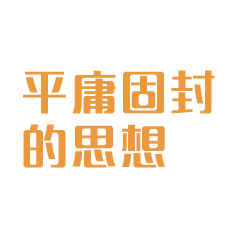
<style>
.page{position:relative;width:241px;height:233px;background:#ffffff}
.page>*{position:absolute;margin:0}
.t1{font:45px "MFLangQian_Noncommercial-Regular";letter-spacing:0.1em;color:#eb993e;font-variant:small-caps}
</style>
<div class="page">
<p class="t1" style="left:23px;top:70px;width:192px;height:98px">平庸固封<br>的思想</p>
</div>
